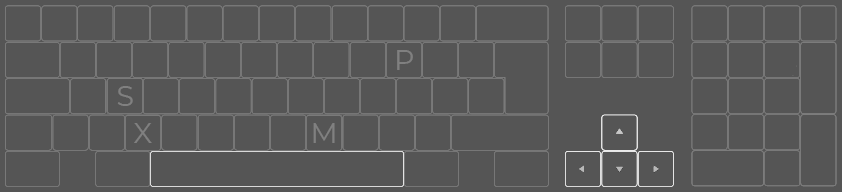
<style>
.page{position:relative;width:842px;height:192px;background:#555555}
.page>*{position:absolute;margin:0}
.t1{font:28.4px "Montserrat-Regular";color:#808080}
</style>
<div class="page">
<p class="t1" style="left:397px;top:50px;width:16px;height:20px">P</p>
<p class="t1" style="left:117px;top:86px;width:16px;height:20px">S</p>
<p class="t1" style="left:134px;top:123px;width:18px;height:20px">X</p>
<p class="t1" style="left:313px;top:123px;width:22px;height:20px">M</p>
</div>
